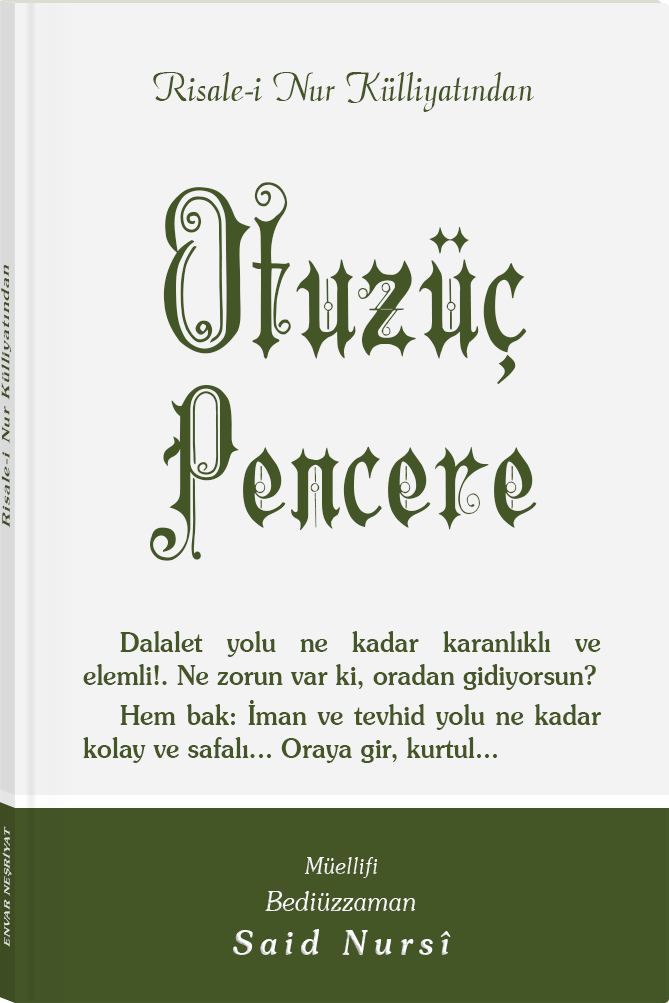
<style>
.page{position:relative;width:669px;height:1003px;background:#f3f3f3}
.page>*{position:absolute;margin:0}
.t1{font:45.3px "Barla © 072 Aria ScriptScriptSSi";color:#445526;scale:0.94 1}
.t2{font:183.2px/173.9px "Barla © 001 Liva Nur";letter-spacing:-0.001em;color:#445526;scale:0.93 1}
.t3{font:216.2px/192.9px "Barla © 001 Liva Nur";letter-spacing:-0.001em;color:#445526;scale:0.93 1}
.t4{font:11.4px "Souvenir-Medium";letter-spacing:0.08em;color:#445526;scale:1.65 1}
.t5{font:27.3px/33px "Souvenir-Medium";color:#445526;scale:0.92 1}
.t6{font:27.3px/40px "Souvenir-Medium";color:#445526;scale:0.92 1}
.t7{font:8.3px "Souvenir-Medium";letter-spacing:0.08em;color:#e5e5e5;scale:1.43 1}
.t8{font:27.1px/37.8px "Souvenir-LightItalic";color:#ffffff;scale:0.92 1}
.t9{font:22.8px/39.8px "Souvenir-LightItalic";color:#ffffff;scale:0.92 1}
.t10{font:33.9px/43.8px "Souvenir-MediumItalic";letter-spacing:0.2em;color:#ffffff;scale:0.92 1}
</style>
<div class="page">
<p class="t1" style="left:153px;top:72px;width:381px;height:40px">Risale-i Nur Külliyatından</p>
<p class="t2" style="left:150px;top:182px;width:387px;height:379px;text-align:center"><span class="t3">Otuzüç<br></span>Pencere</p>
<p class="t4" style="left:1px;top:265px;width:10px;height:263px;rotate:-90deg">Risale-i Nur Külliyatından</p>
<p class="t5" style="left:83px;top:631px;width:519px;height:132px;text-align:justify">Dalalet yolu ne kadar karanlıklı ve elemli!. Ne zorun var ki, oradan gidiyorsun?<br> Hem bak: <span class="t6">İman </span>ve tevhid yolu ne kadar kolay ve safalı... Oraya gir, kurtul...</p>
<p class="t7" style="left:2px;top:826px;width:10px;height:121px;rotate:-90deg">ENVAR NEŞRİYAT</p>
<p class="t8" style="left:233px;top:857px;width:218px;height:98px;text-align:center"><span class="t9">Müellifi<br></span>Bediüzzaman<br><span class="t10">Said Nursî</span></p>
</div>
